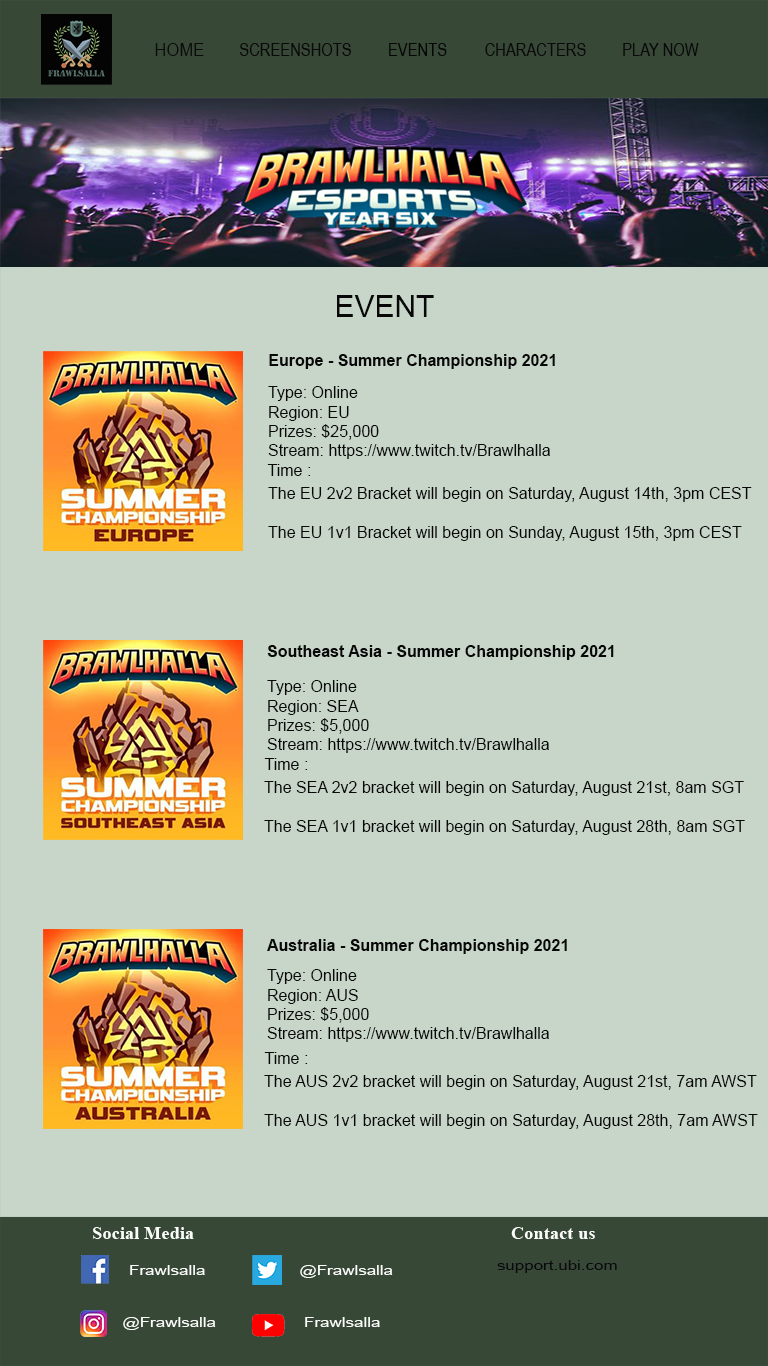
<style>
.page{position:relative;width:768px;height:1366px;background:#c8d5c9}
.page>*{position:absolute;margin:0}
.t1{font:18px "ArialNarrow";color:#0a0b0a;scale:1.13 1}
.t2{font:18px "ArialNarrow";color:#090909}
.t3{font:18px "ArialNarrow";color:#060606}
.t4{font:18px "ArialNarrow";color:#0a0a0a}
.t5{font:30px "ArialMT";color:#080808}
.t6{font:16px "Arial-BoldMT";color:#080808}
.t7{font:16px "ArialMT";color:#080808}
.t8{font:18.5px "TimesNewRomanPS-BoldMT";color:#fbfdfb}
.t9{font:14px "ArialMT";color:#fbfdfb;scale:1.21 1}
.t10{font:14px "ArialMT";color:#08080d;scale:1.21 1}
</style>
<div class="page">
<p class="t1" style="left:155px;top:43px;width:49px;height:13px">HOME</p>
<p class="t2" style="left:239px;top:43px;width:112px;height:13px">SCREENSHOTS</p>
<p class="t3" style="left:389px;top:43px;width:58px;height:13px">EVENTS</p>
<p class="t4" style="left:485px;top:43px;width:101px;height:13px">CHARACTERS</p>
<p class="t4" style="left:623px;top:43px;width:76px;height:13px">PLAY NOW</p>
<p class="t5" style="left:337px;top:295px;width:97px;height:22px">EVENT</p>
<p class="t6" style="left:269px;top:354px;width:286px;height:15px">Europe - Summer Championship 2021</p>
<p class="t7" style="left:268px;top:386px;width:282px;height:73px">Type: Online<br>Region: EU<br>Prizes: $25,000<br>Stream: https://www.twitch.tv/Brawlhalla</p>
<p class="t7" style="left:267px;top:464px;width:44px;height:12px">Time :</p>
<p class="t7" style="left:268px;top:487px;width:484px;height:54px">The EU 2v2 Bracket will begin on Saturday, August 14th, 3pm CEST<br><br>The EU 1v1 Bracket will begin on Sunday, August 15th, 3pm CEST</p>
<p class="t6" style="left:267px;top:645px;width:347px;height:15px">Southeast Asia - Summer Championship 2021</p>
<p class="t7" style="left:267px;top:680px;width:282px;height:73px">Type: Online<br>Region: SEA<br>Prizes: $5,000<br>Stream: https://www.twitch.tv/Brawlhalla</p>
<p class="t7" style="left:264px;top:758px;width:44px;height:12px">Time :</p>
<p class="t7" style="left:264px;top:781px;width:481px;height:54px">The SEA 2v2 bracket will begin on Saturday, August 21st, 8am SGT<br><br>The SEA 1v1 bracket will begin on Saturday, August 28th, 8am SGT</p>
<p class="t6" style="left:267px;top:939px;width:300px;height:15px">Australia - Summer Championship 2021</p>
<p class="t7" style="left:267px;top:969px;width:282px;height:73px">Type: Online<br>Region: AUS<br>Prizes: $5,000<br>Stream: https://www.twitch.tv/Brawlhalla</p>
<p class="t7" style="left:264px;top:1052px;width:44px;height:12px">Time :</p>
<p class="t7" style="left:264px;top:1075px;width:494px;height:54px">The AUS 2v2 bracket will begin on Saturday, August 21st, 7am AWST<br><br>The AUS 1v1 bracket will begin on Saturday, August 28th, 7am AWST</p>
<p class="t8" style="left:93px;top:1227px;width:101px;height:12px">Social Media</p>
<p class="t8" style="left:511px;top:1227px;width:84px;height:12px">Contact us</p>
<p class="t9" style="left:130px;top:1265px;width:75px;height:10px">Frawlsalla</p>
<p class="t9" style="left:300px;top:1265px;width:93px;height:13px">@Frawlsalla</p>
<p class="t10" style="left:497px;top:1260px;width:120px;height:13px">support.ubi.com</p>
<p class="t9" style="left:123px;top:1317px;width:93px;height:13px">@Frawlsalla</p>
<p class="t9" style="left:305px;top:1317px;width:75px;height:10px">Frawlsalla</p>
</div>
